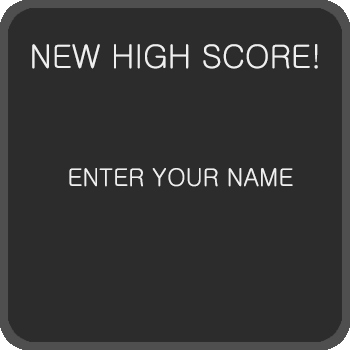
<style>
.page{position:relative;width:350px;height:350px;background:#2c2c2c}
.page>*{position:absolute;margin:0}
.t1{font:32px "Gulim";color:#efefef}
.t2{font:24px "Gulim";color:#efefef}
</style>
<div class="page">
<p class="t1" style="left:32px;top:44px;width:286px;height:25px">NEW HIGH SCORE!</p>
<p class="t2" style="left:69px;top:168px;width:224px;height:19px">ENTER YOUR NAME</p>
</div>
